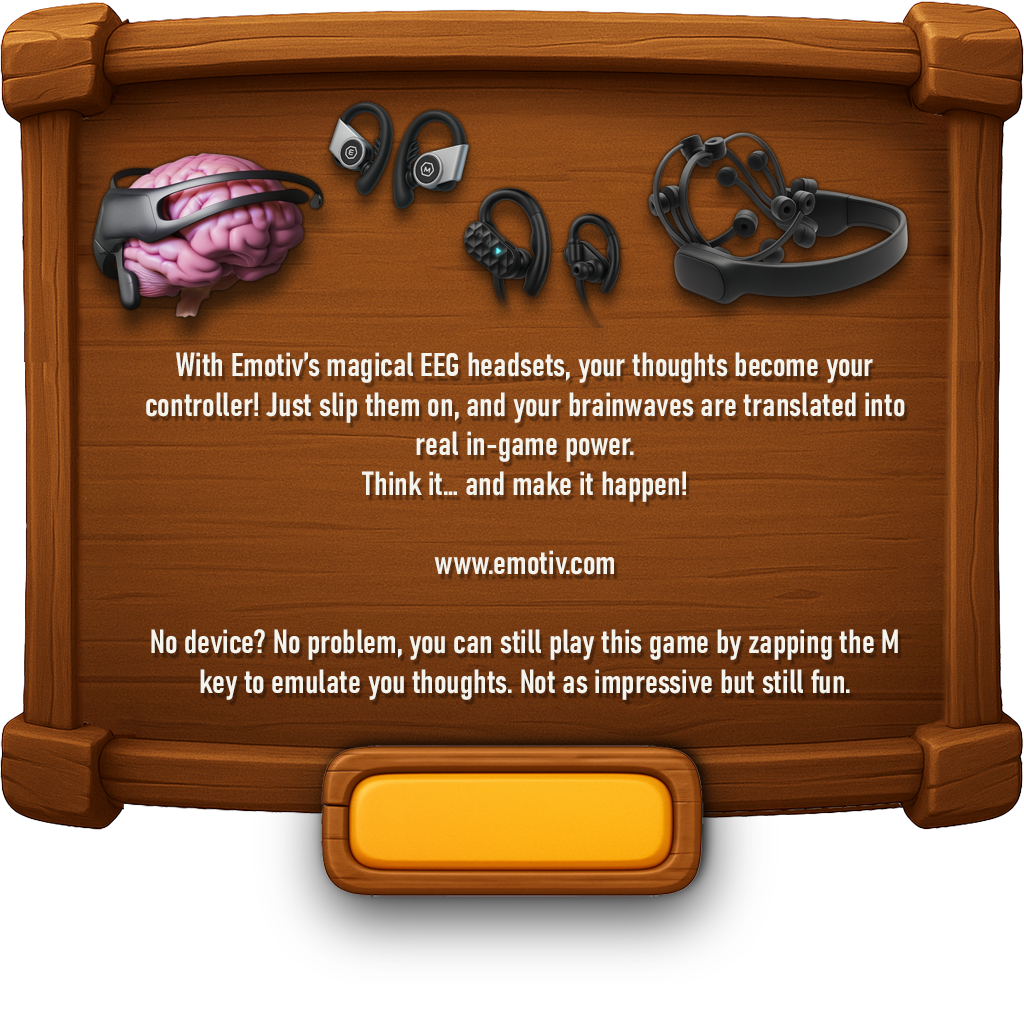
<style>
.page{position:relative;width:1024px;height:1024px}
.page>*{position:absolute;margin:0}
.t1{font:33px "Bahnschrift-SemiBoldCondensed";color:#f4f3ec}
</style>
<div class="page">
<p class="t1" style="left:146px;top:352px;width:759px;height:348px;text-align:center">With Emotiv’s magical EEG headsets, your thoughts become your controller! Just slip them on, and your brainwaves are translated into real in-game power. <br>Think it… and make it happen!<br><br>www.emotiv.com<br><br>No device? No problem, you can still play this game by zapping the M key to emulate you thoughts. Not as impressive but still fun.</p>
</div>
